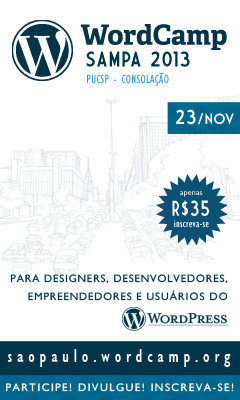
<style>
.page{position:relative;width:240px;height:400px;background:#ffffff}
.page>*{position:absolute;margin:0}
.t1{font:20.8px "MarketDeco";letter-spacing:0.025em;color:#013549}
.t2{font:12.2px "GillSansMT-Condensed";letter-spacing:0.025em;color:#349fc7}
.t3{font:14.6px "MarketDeco";letter-spacing:0.025em;color:#ffffff}
.t4{font:19.8px "MarketDeco";letter-spacing:0.025em;color:#ffffff}
.t5{font:7.9px "GillSansMT";letter-spacing:0.025em;color:#ffffff}
.t6{font:21px "MarketDeco";letter-spacing:0.025em;color:#ffffff;scale:0.84 1}
.t7{font:10.6px "GillSansMT-Condensed";letter-spacing:0.025em;color:#ffffff}
.t8{font:10.8px/17.1px "GillSansMT";letter-spacing:0.08em;color:#003449;text-transform:uppercase}
.t9{font:10.8px/17.1px "GillSansMT";letter-spacing:0.1em;color:#003449;text-transform:uppercase}
.t10{font:19.1px "GillSansMT-Condensed";letter-spacing:0.25em;color:#fefefe}
.t11{font:11px "GillSansMT";letter-spacing:0.13em;color:#feffff;text-transform:uppercase}
</style>
<div class="page">
<p class="t1" style="left:86px;top:51px;width:104px;height:16px">SAMPA 2013</p>
<p class="t2" style="left:87px;top:72px;width:82px;height:14px">PUCSP - CONSOLAÇÃO</p>
<p class="t3" style="left:176px;top:109px;width:58px;height:16px"><span class="t4">23</span>/nov</p>
<p class="t5" style="left:180px;top:191px;width:23px;height:6px">apenas</p>
<p class="t6" style="left:172px;top:200px;width:37px;height:16px">R$35</p>
<p class="t7" style="left:174px;top:220px;width:35px;height:8px">inscreva-se</p>
<p class="t8" style="left:10px;top:274px;width:218px;height:27px;text-align:right">Para Designers, desenvolvedores, empreendedores e U<span class="t9">suárioS DO</span></p>
<p class="t10" style="left:7px;top:349px;width:224px;height:18px">saopaulo.wordcamp.org</p>
<p class="t11" style="left:6px;top:383px;width:228px;height:9px">Participe! DIVULGUE! Inscreva-se!</p>
</div>
